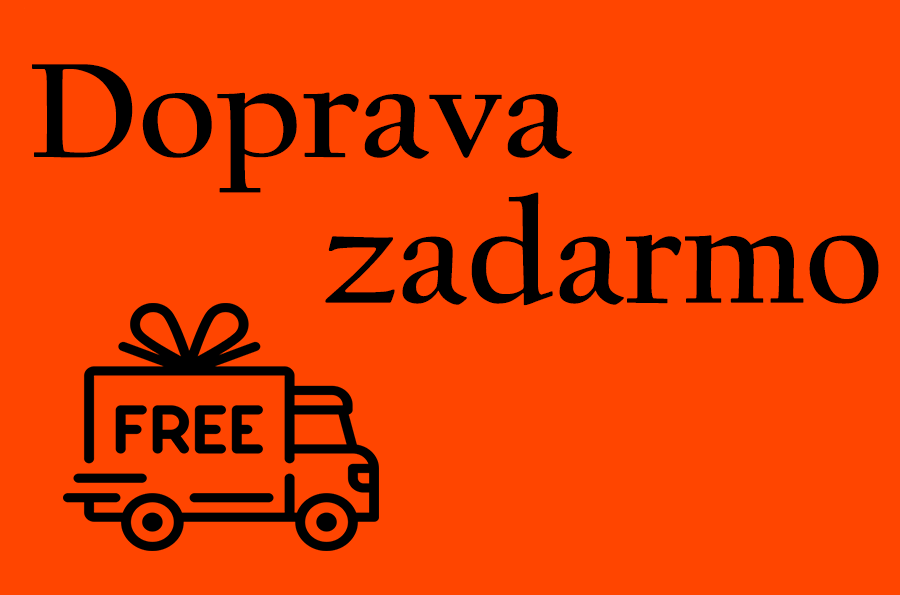
<style>
.page{position:relative;width:900px;height:595px;background:#ff4500}
.page>*{position:absolute;margin:0}
.t1{font:139.7px "CalifornianFB-Bold";color:#000000;scale:1.07 1}
.t2{font:147.2px "CalifornianFB-Bold";color:#000000}
</style>
<div class="page">
<p class="t1" style="left:32px;top:64px;width:540px;height:129px">Doprava</p>
<p class="t2" style="left:325px;top:192px;width:554px;height:114px">zadarmo</p>
</div>
